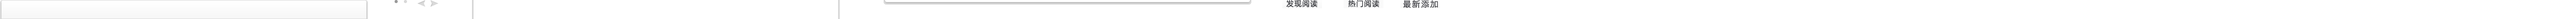
<style>
.page{position:relative;width:2576px;height:19px;background:#ffffff}
.page>*{position:absolute;margin:0}
.t1{font:7.2px "MicrosoftYaHei";letter-spacing:0.1em;color:#34353a}
</style>
<div class="page">
<p class="t1" style="left:1286px;top:0px;width:31px;height:7px">发现阅读</p>
<p class="t1" style="left:1348px;top:0px;width:31px;height:7px">热门阅读</p>
</div>
